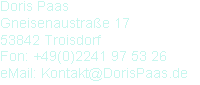
<style>
.page{position:relative;width:200px;height:85px;background:#ffffff}
.page>*{position:absolute;margin:0}
.t1{font:14px "ArialMT";color:#c8f7ef}
</style>
<div class="page">
<p class="t1" style="left:1px;top:1px;width:186px;height:80px">Doris Paas<br>Gneisenaustraße 17<br>53842 Troisdorf<br>Fon: +49(0)2241 97 53 26<br>eMail: Kontakt@DorisPaas.de</p>
</div>
